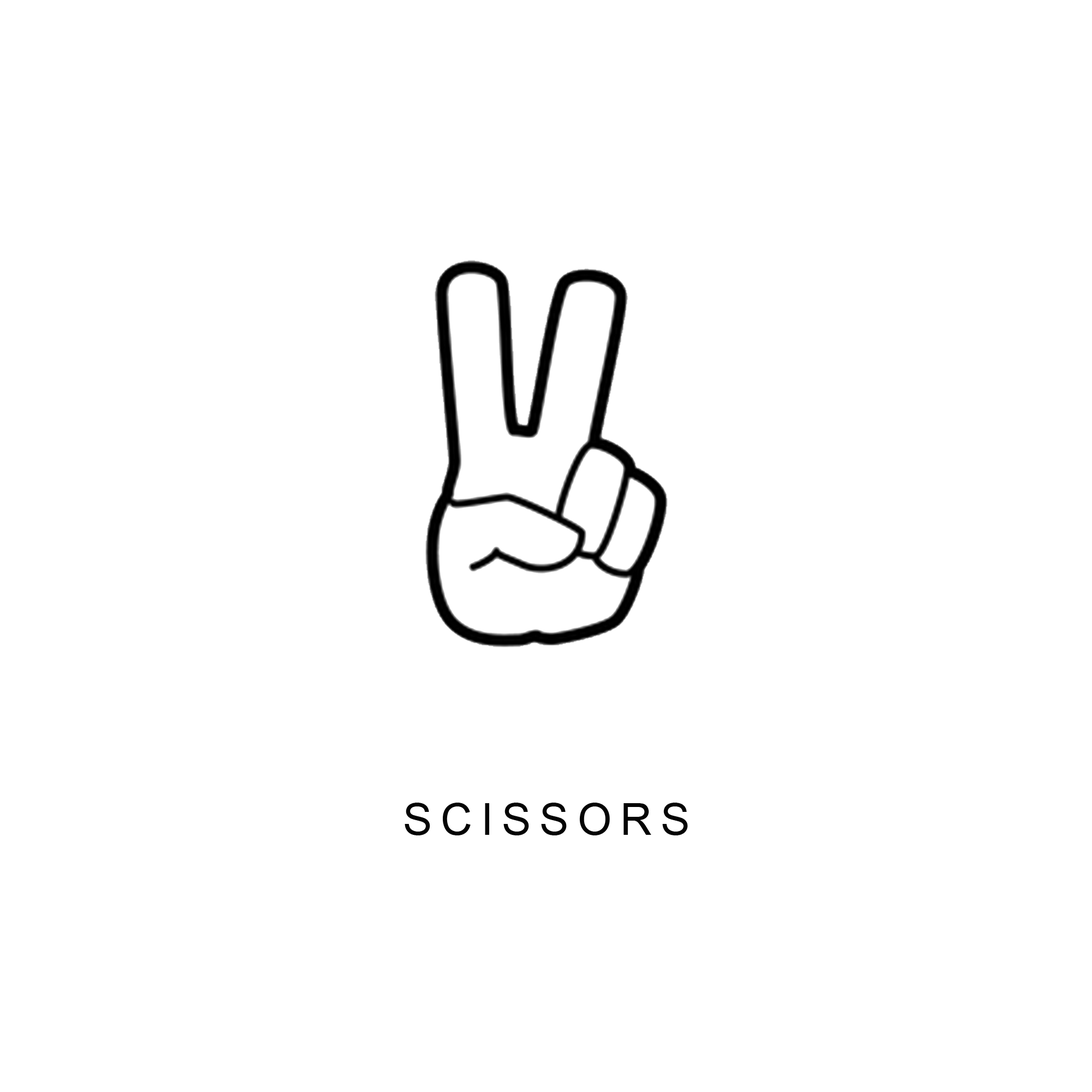
<style>
.page{position:relative;width:1092px;height:1092px;background:#ffffff}
.page>*{position:absolute;margin:0}
.t1{font:43.7px "ArialMT";letter-spacing:0.2em;color:#040404}
</style>
<div class="page">
<p class="t1" style="left:405px;top:803px;width:283px;height:32px">SCISSORS</p>
</div>
